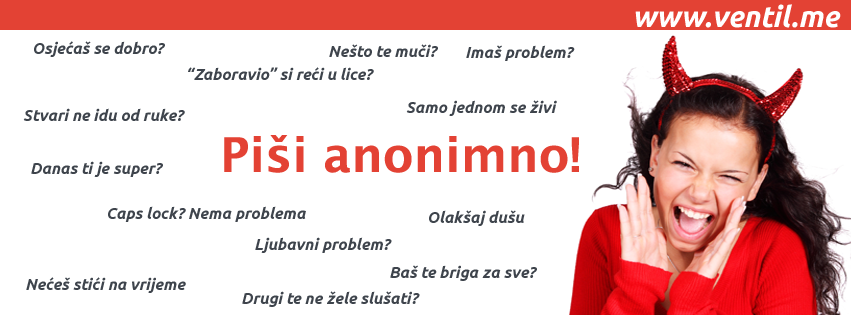
<style>
.page{position:relative;width:851px;height:315px;background:#ffffff}
.page>*{position:absolute;margin:0}
.t1{font:29.6px "Ubuntu-BoldItalic";color:#ffffff}
.t2{font:16px "Ubuntu-BoldItalic";color:#3e444c}
.t3{font:48px "LucidaSans-Demi";color:#e34234}
</style>
<div class="page">
<p class="t1" style="left:635px;top:4px;width:206px;height:24px">www.ventil.me</p>
<p class="t2" style="left:34px;top:41px;width:131px;height:16px">Osjećaš se dobro?</p>
<p class="t2" style="left:329px;top:44px;width:109px;height:13px">Nešto te muči?</p>
<p class="t2" style="left:466px;top:45px;width:109px;height:16px">Imaš problem?</p>
<p class="t2" style="left:188px;top:67px;width:186px;height:13px">“Zaboravio” si reći u lice?</p>
<p class="t2" style="left:406px;top:100px;width:151px;height:16px">Samo jednom se živi</p>
<p class="t2" style="left:23px;top:108px;width:162px;height:13px">Stvari ne idu od ruke?</p>
<p class="t3" style="left:224px;top:135px;width:355px;height:38px">Piši anonimno!</p>
<p class="t2" style="left:31px;top:161px;width:132px;height:16px">Danas ti je super?</p>
<p class="t2" style="left:108px;top:206px;width:198px;height:16px">Caps lock? Nema problema</p>
<p class="t2" style="left:429px;top:210px;width:96px;height:16px">Olakšaj dušu</p>
<p class="t2" style="left:255px;top:237px;width:137px;height:16px">Ljubavni problem?</p>
<p class="t2" style="left:390px;top:265px;width:147px;height:16px">Baš te briga za sve?</p>
<p class="t2" style="left:26px;top:277px;width:160px;height:16px">Nećeš stići na vrijeme</p>
<p class="t2" style="left:242px;top:291px;width:178px;height:16px">Drugi te ne žele slušati?</p>
</div>
